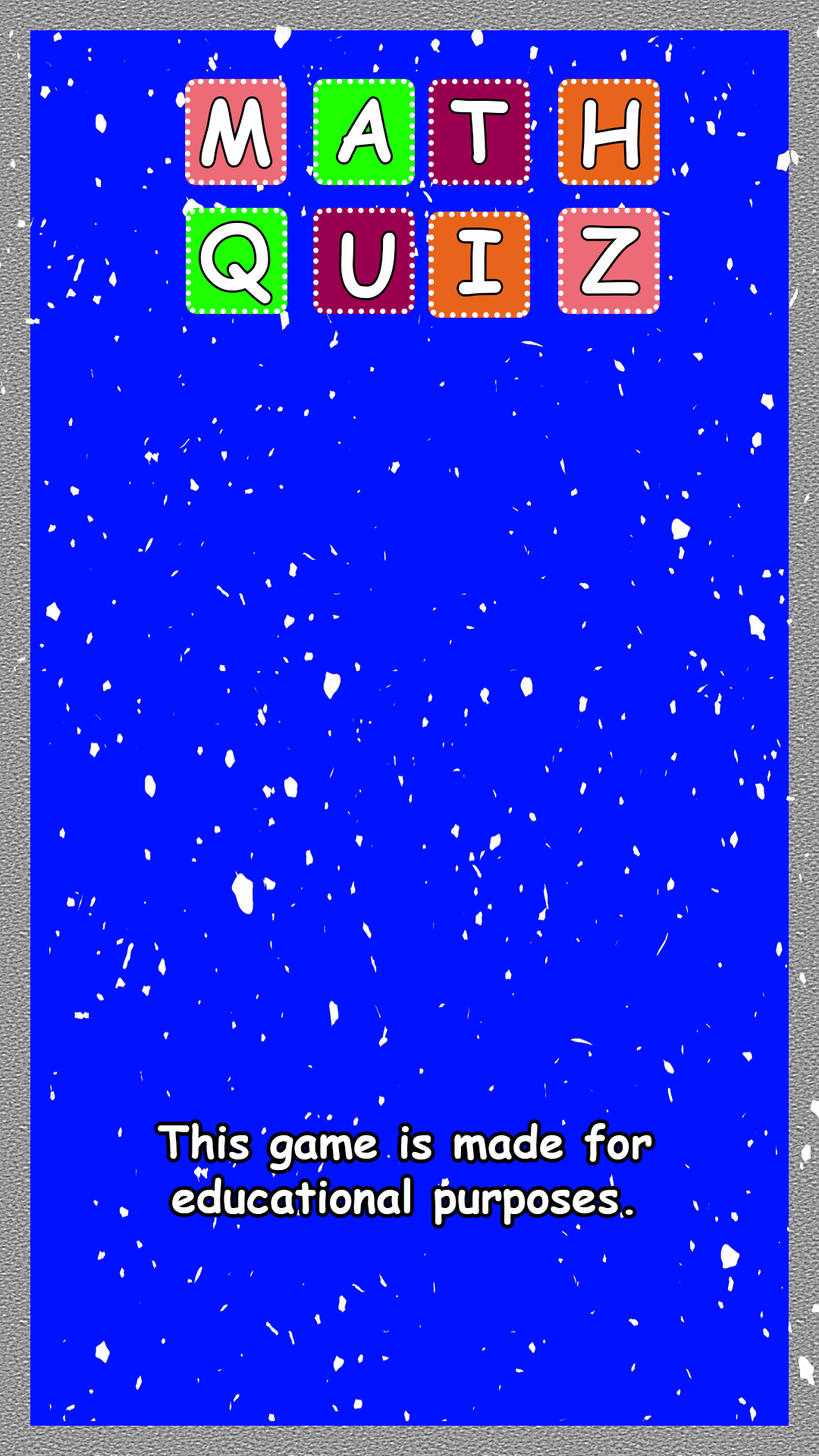
<style>
.page{position:relative;width:819px;height:1456px;background:#0012ff}
.page>*{position:absolute;margin:0}
.t1{font:86.4px "ComicSansMS-Bold";color:#ffffff;scale:0.96 1}
.t2{font:85.4px "ComicSansMS-Bold";color:#ffffff;scale:0.96 1}
.t3{font:84.4px "ComicSansMS-Bold";color:#ffffff;scale:0.96 1}
.t4{font:86px "ComicSansMS-Bold";color:#ffffff;scale:0.96 1}
.t5{font:45.1px "ComicSansMS-Bold";color:#ffffff}
</style>
<div class="page">
<p class="t1" style="left:201px;top:99px;width:70px;height:68px">M</p>
<p class="t1" style="left:337px;top:99px;width:54px;height:63px">A</p>
<p class="t2" style="left:450px;top:99px;width:58px;height:64px">T</p>
<p class="t1" style="left:582px;top:100px;width:58px;height:68px">H</p>
<p class="t3" style="left:200px;top:223px;width:71px;height:80px">Q</p>
<p class="t4" style="left:341px;top:233px;width:54px;height:65px">U</p>
<p class="t1" style="left:459px;top:230px;width:42px;height:64px">I</p>
<p class="t1" style="left:582px;top:227px;width:57px;height:66px">Z</p>
<p class="t5" style="left:158px;top:1123px;width:494px;height:102px;text-align:center">This game is made for educational purposes.</p>
</div>
